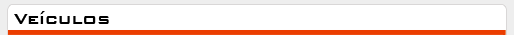
<style>
.page{position:relative;width:514px;height:35px;background:#ffffff}
.page>*{position:absolute;margin:0}
.t1{font:20px "BankGothicBT-Medium";color:#000000}
</style>
<div class="page">
<p class="t1" style="left:14px;top:11px;width:95px;height:13px">Veículos</p>
</div>
